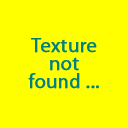
<style>
.page{position:relative;width:128px;height:128px;background:#ffff00}
.page>*{position:absolute;margin:0}
.t1{font:20px/18px "MyriadPro-Regular";color:#007f7f;font-weight:bold}
</style>
<div class="page">
<p class="t1" style="left:28px;top:38px;width:71px;height:51px;text-align:center">Texture<br>not<br>found ...</p>
</div>
